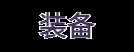
<style>
.page{position:relative;width:134px;height:52px;background:#000000}
.page>*{position:absolute;margin:0}
.t1{font:28px/28px "WebPSD-18463539-0-Regular";color:#3f3254;font-weight:bold}
</style>
<div class="page">
<p class="t1" style="left:0px;top:0px;width:134px;height:52px;text-align:center">装备</p>
</div>
